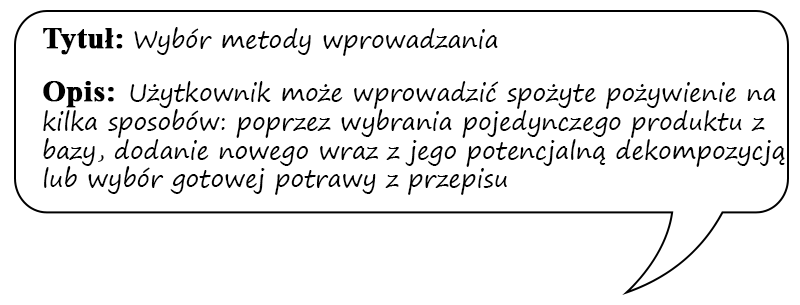
<style>
.page{position:relative;width:800px;height:305px;background:#ffffff}
.page>*{position:absolute;margin:0}
.t1{font:24px "SegoePrint";color:#000000}
.t2{font:30px "TimesNewRomanPS-BoldMT";color:#000000;font-weight:bold}
</style>
<div class="page">
<p class="t1" style="left:43px;top:27px;width:742px;height:168px"><span class="t2">Tytuł: </span>Wybór metody wprowadzania<br><br><span class="t2">Opis:  </span>Użytkownik może wprowadzić spożyte pożywienie na kilka sposobów: poprzez wybrania pojedynczego produktu z bazy, dodanie nowego wraz z jego potencjalną dekompozycją lub wybór gotowej potrawy z przepisu</p>
</div>
